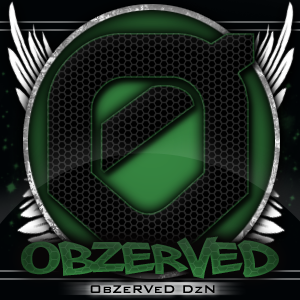
<style>
.page{position:relative;width:300px;height:300px}
.page>*{position:absolute;margin:0}
.t1{font:340px "HYPDBDBardustRemix";color:#000000}
.t2{font:65px "PhillySans";color:#27532d}
.t3{font:15px "BankGothicBT-Medium";color:#000000}
</style>
<div class="page">
<p class="t1" style="left:47px;top:33px;width:208px;height:225px">O</p>
<p class="t2" style="left:21px;top:236px;width:258px;height:43px">ObZervED</p>
<p class="t3" style="left:90px;top:285px;width:125px;height:8px">ObZeRVeD DzN</p>
</div>
